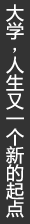
<style>
.page{position:relative;width:30px;height:224px;background:#333333}
.page>*{position:absolute;margin:0}
.t1{font:18px "MicrosoftYaHei";color:#ffffff}
.t2{font:18px "SimSun";color:#ffffff}
</style>
<div class="page">
<p class="t1" style="left:6px;top:4px;width:18px;height:214px">大学   人生又一个新的起点</p>
<p class="t2" style="left:13px;top:47px;width:3px;height:6px">，</p>
</div>
